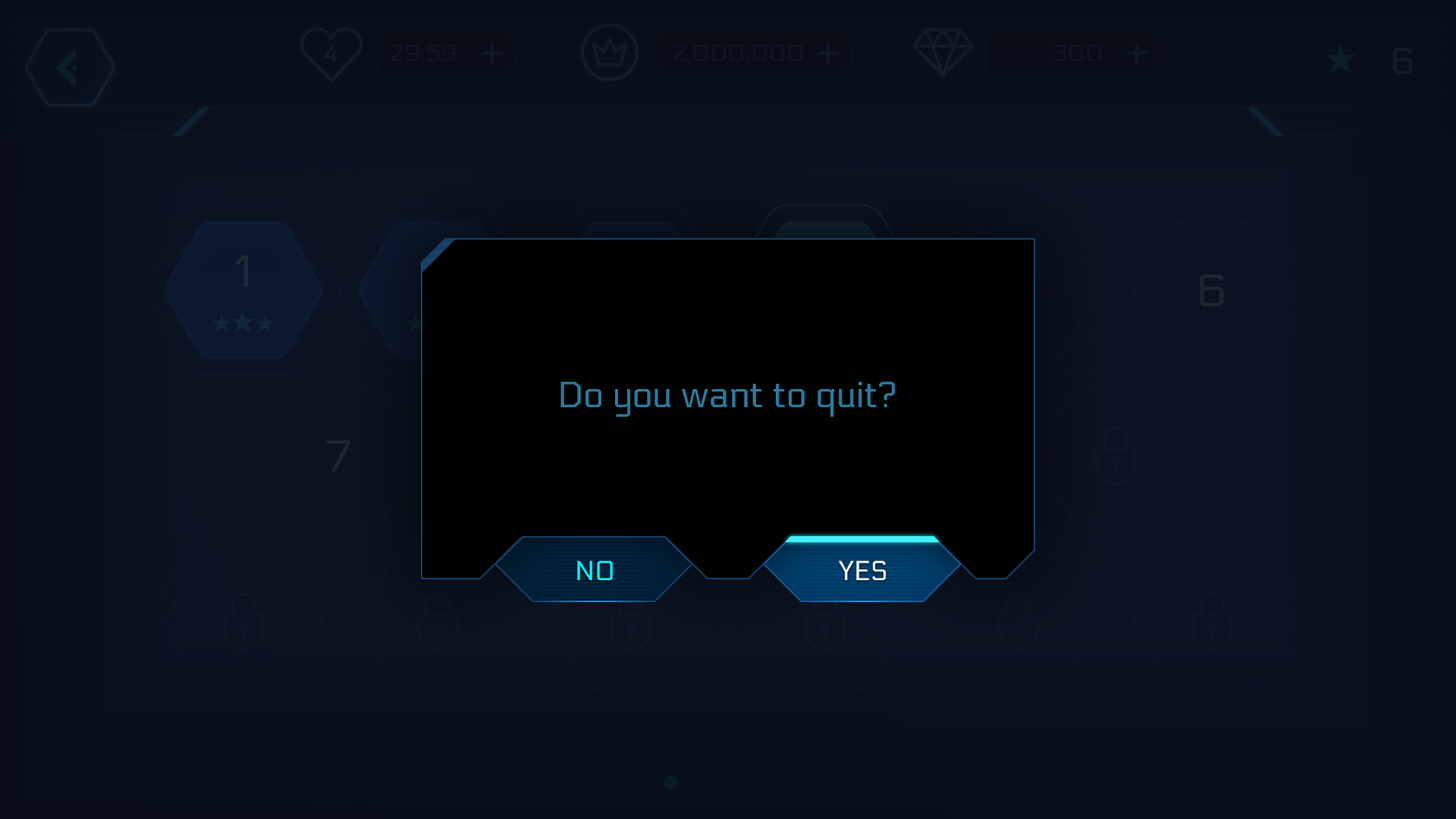
<style>
.page{position:relative;width:1456px;height:819px}
.page>*{position:absolute;margin:0}
.t1{font:36.4px "Electrolize-Regular";color:#2c799f}
.t2{font:27.3px "Electrolize-Regular";color:#00f7ff;text-transform:uppercase}
.t3{font:27.3px "Electrolize-Regular";color:#ffffff;text-transform:uppercase}
</style>
<div class="page">
<p class="t1" style="left:560px;top:381px;width:335px;height:36px">Do you want to quit?</p>
<p class="t2" style="left:577px;top:560px;width:36px;height:20px">nO</p>
<p class="t3" style="left:839px;top:560px;width:47px;height:20px">Yes</p>
<p class="t3" style="left:839px;top:560px;width:47px;height:20px">yes</p>
</div>
